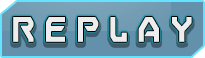
<style>
.page{position:relative;width:205px;height:58px;background:#6391ab}
.page>*{position:absolute;margin:0}
.t1{font:33.5px "VoyagerGrotesqueBold";letter-spacing:0.3em;color:#ffffff}
</style>
<div class="page">
<p class="t1" style="left:13px;top:17px;width:179px;height:25px">REPLAY</p>
</div>
